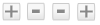
<style>
.page{position:relative;width:100px;height:25px;background:#ffffff}
.page>*{position:absolute;margin:0}
.t1{font:24px "Futura-Medium";letter-spacing:0.02em;color:#888888}
.t2{font:36px "Futura-Medium";letter-spacing:0.02em;color:#888888}
</style>
<div class="page">
<p class="t1" style="left:5px;top:5px;width:13px;height:13px">+</p>
<p class="t1" style="left:80px;top:5px;width:13px;height:13px">+</p>
<p class="t2" style="left:32px;top:9px;width:8px;height:4px">-</p>
<p class="t2" style="left:57px;top:9px;width:8px;height:4px">-</p>
</div>
